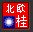
<style>
.page{position:relative;width:33px;height:32px;background:#f20000}
.page>*{position:absolute;margin:0}
.t1{font:10.4px "SimSun";color:#ffffff}
.t2{font:11.7px "SimSun";color:#ffffff}
</style>
<div class="page">
<p class="t1" style="left:6px;top:4px;width:19px;height:9px">北欧</p>
<p class="t2" style="left:16px;top:15px;width:11px;height:12px">桂</p>
</div>
